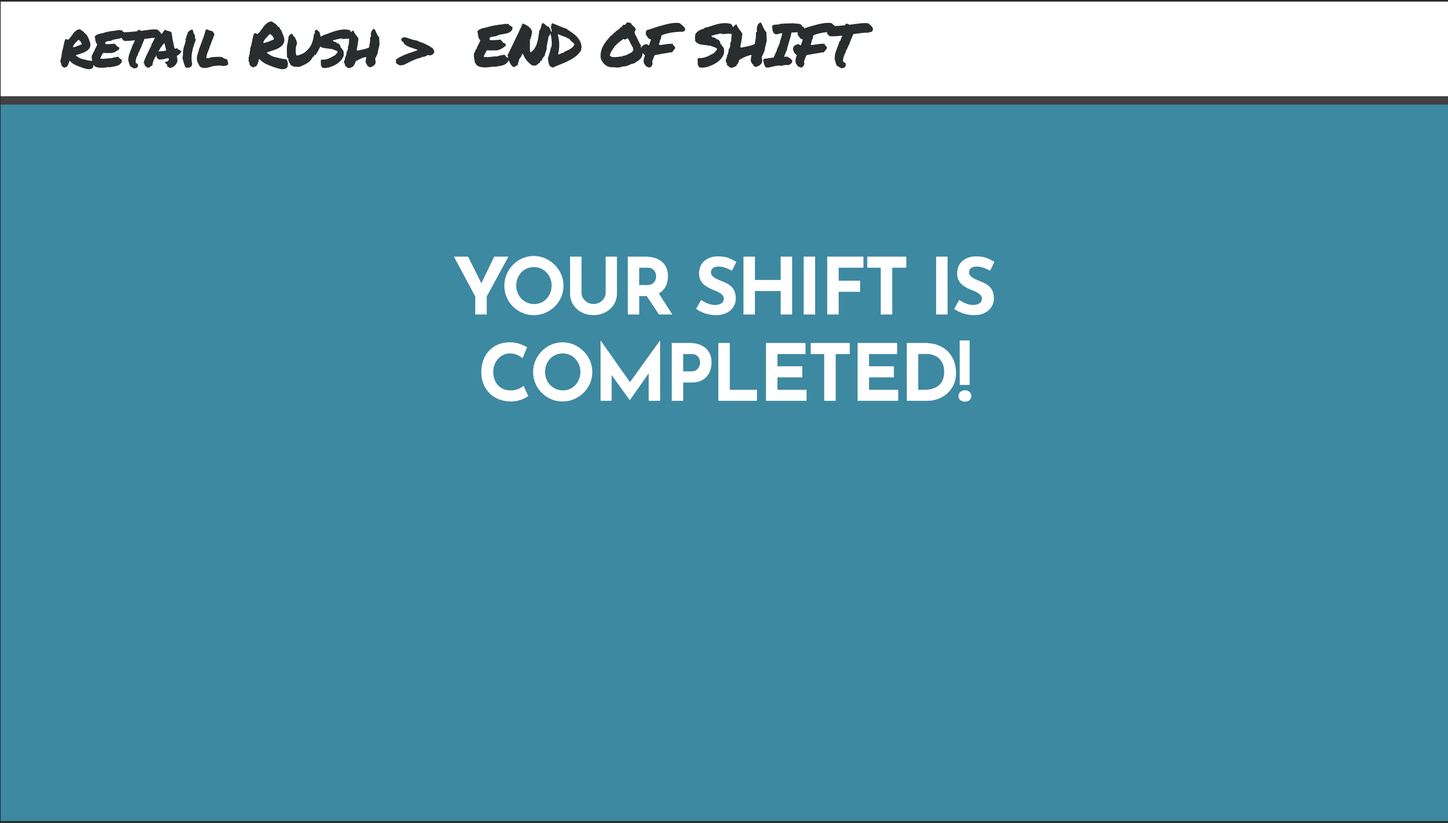
<style>
.page{position:relative;width:1448px;height:823px;background:#3d89a1}
.page>*{position:absolute;margin:0}
.t1{font:60px "PermanentMarker-Regular";letter-spacing:-0.04em;color:#2a2d2d}
.t2{font:60px "Arial-BoldMT";letter-spacing:-0.04em;color:#ffffff}
.t3{font:78.5px/86.6px "JosefinSans-Bold";letter-spacing:-0.04em;color:#ffffff}
</style>
<div class="page">
<p class="t1" style="left:440px;top:22px;width:433px;height:47px"><span class="t2">E</span>END OF SHIFT</p>
<p class="t3" style="left:454px;top:256px;width:541px;height:146px;text-align:center">YOUR SHIFT IS<br>COMPLETED!</p>
</div>
